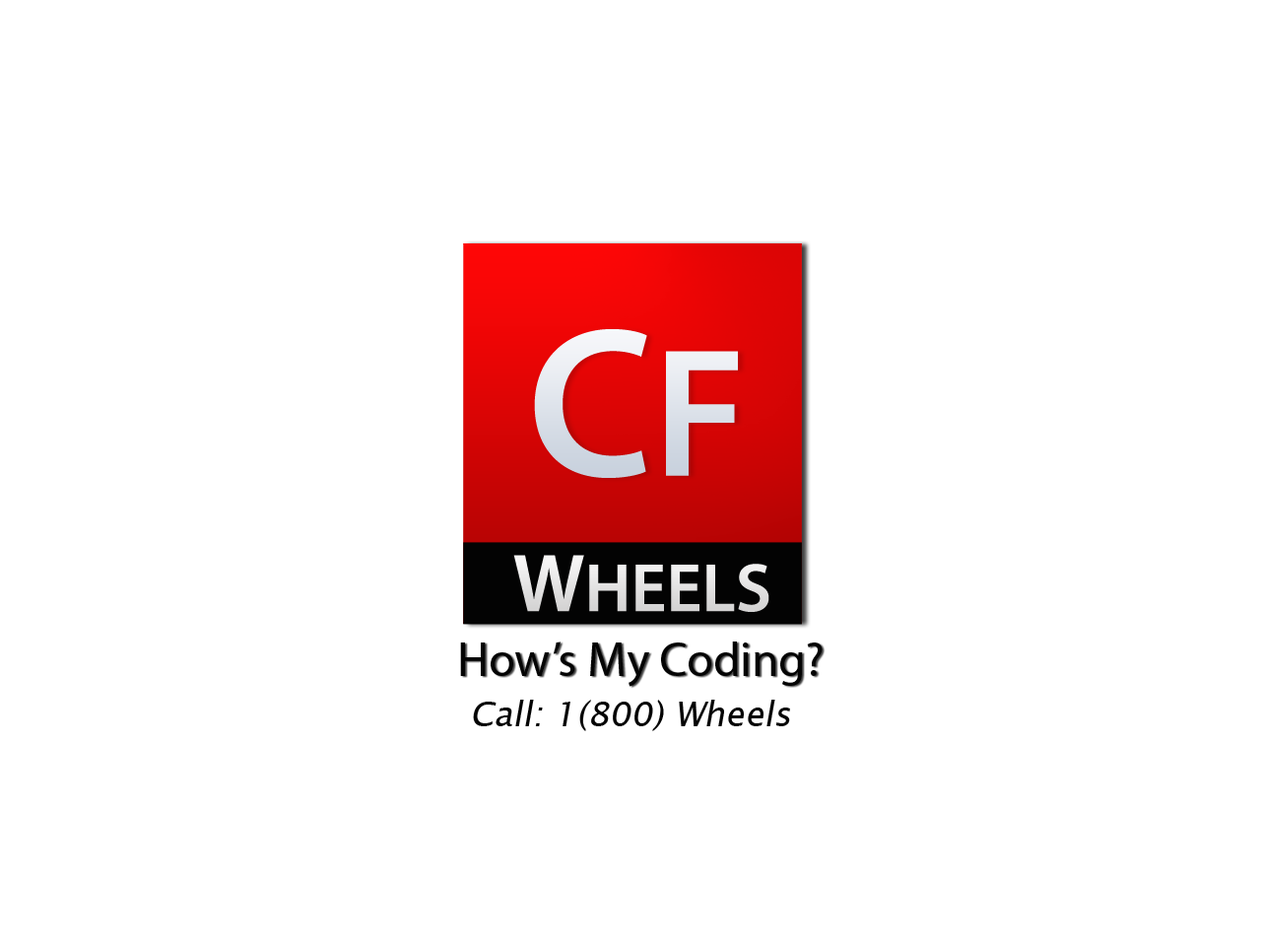
<style>
.page{position:relative;width:1261px;height:946px;background:#ffffff}
.page>*{position:absolute;margin:0}
.t1{font:213.6px "MyriadPro-Semibold";color:#dee3eb}
.t2{font:184px "MyriadPro-Semibold";color:#dee3eb}
.t3{font:68.8px "MyriadPro-Semibold";color:#e3e2e2}
.t4{font:82.6px "MyriadPro-Semibold";color:#e3e2e2}
.t5{font:48.2px "MyriadPro-Regular";color:#040404}
.t6{font:34.4px "LucidaSansUnicode";color:#040404;font-style:italic}
</style>
<div class="page">
<p class="t1" style="left:534px;top:329px;width:204px;height:149px">C<span class="t2">F</span></p>
<p class="t3" style="left:513px;top:555px;width:256px;height:57px"><span class="t4">W</span>HEELS</p>
<p class="t5" style="left:460px;top:641px;width:363px;height:46px">How’s My Coding?</p>
<p class="t6" style="left:473px;top:699px;width:317px;height:32px">Call: 1(800) Wheels</p>
</div>
